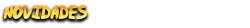
<style>
.page{position:relative;width:250px;height:28px;background:#ffffff}
.page>*{position:absolute;margin:0}
.t1{font:15px "Ninja-Naruto"}
</style>
<div class="page">
<p class="t1" style="left:4px;top:4px;width:83px;height:15px">NOVIDADES</p>
</div>
